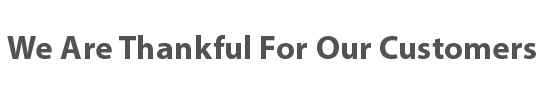
<style>
.page{position:relative;width:550px;height:92px;background:#ffffff}
.page>*{position:absolute;margin:0}
.t1{font:33.3px "MyriadPro-Bold";letter-spacing:0.004em;color:#555251}
</style>
<div class="page">
<p class="t1" style="left:7px;top:35px;width:529px;height:24px">We Are Thankful For Our Customers</p>
</div>
